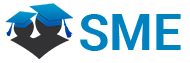
<style>
.page{position:relative;width:190px;height:63px;background:#ffffff}
.page>*{position:absolute;margin:0}
.t1{font:50px "Roboto-Bold";color:#0081c0}
</style>
<div class="page">
<p class="t1" style="left:80px;top:14px;width:101px;height:37px">SME</p>
</div>
